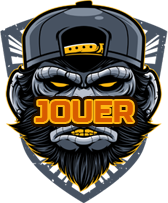
<style>
.page{position:relative;width:168px;height:203px;background:#ffffff}
.page>*{position:absolute;margin:0}
.t1{font:30px "RussoOne";color:#d75b00;text-transform:uppercase}
</style>
<div class="page">
<p class="t1" style="left:35px;top:101px;width:99px;height:21px">Jouer</p>
</div>
